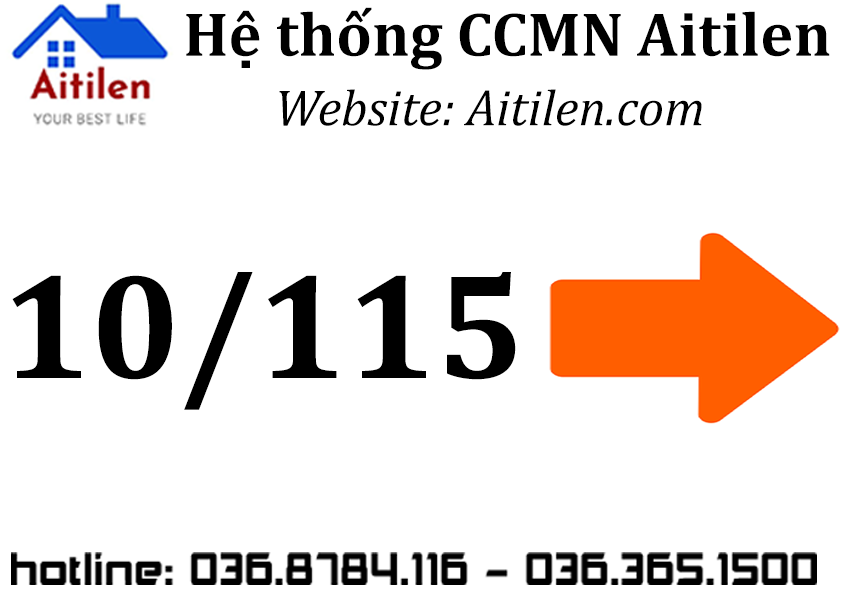
<style>
.page{position:relative;width:842px;height:595px;background:#ffffff}
.page>*{position:absolute;margin:0}
.t1{font:62.9px "Cambria-Bold";color:#000000}
.t2{font:51.3px "Cambria-Italic";color:#000000}
.t3{font:151.2px "Cambria-Bold";color:#000000}
</style>
<div class="page">
<p class="t1" style="left:186px;top:7px;width:644px;height:63px">Hệ thống CCMN Aitilen</p>
<p class="t2" style="left:279px;top:89px;width:423px;height:37px">Website: Aitilen.com</p>
<p class="t3" style="left:12px;top:272px;width:504px;height:138px">10/115</p>
</div>
